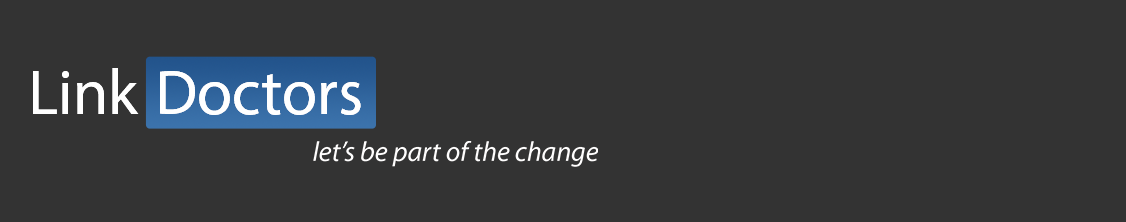
<style>
.page{position:relative;width:1126px;height:222px;background:#333333}
.page>*{position:absolute;margin:0}
.t1{font:89.9px "MyriadArabic-Regular";color:#ffffff}
</style>
<div class="page">
<p class="t1" style="left:33px;top:68px;width:328px;height:47px">Link Doctors</p>
<p class="t1" style="left:33px;top:68px;width:328px;height:47px">Link Doctors</p>
</div>
